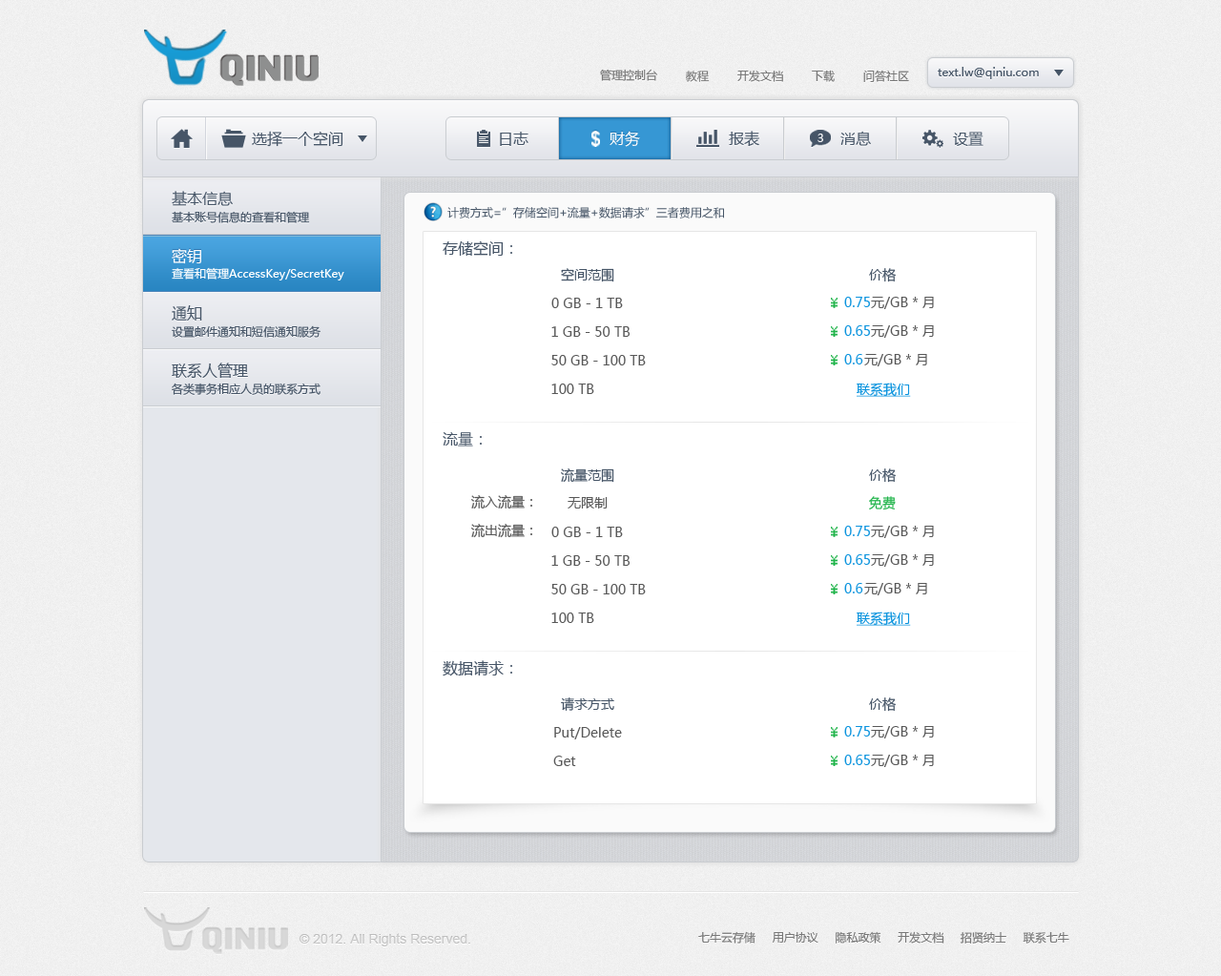
<style>
.page{position:relative;width:1221px;height:976px;background:#ffffff}
.page>*{position:absolute;margin:0}
.t1{font:11.5px "MicrosoftYaHei";color:#787878}
.t2{font:11.5px "MicrosoftYaHei";color:#465567}
.t3{font:15.3px "MicrosoftYaHei";color:#465567}
.t4{font:15.3px "MicrosoftYaHei";color:#ffffff}
.t5{font:11.5px "MicrosoftYaHei";color:#f8f8f9}
.t6{font:11.5px "MicrosoftYaHei";color:#ffffff}
.t7{font:13.4px "MicrosoftYaHei";color:#465567}
.t8{font:13.4px "MicrosoftYaHei";color:#585858}
.t9{font:13.4px "MicrosoftYaHei";color:#0c94de}
.t10{font:13.4px "MicrosoftYaHei";color:#0c94de;text-decoration:underline}
.t11{font:13.4px "MicrosoftYaHei";color:#20b44a}
.t12{font:13.4px "ArialMT";color:#c6c6c6}
</style>
<div class="page">
<p class="t1" style="left:600px;top:69px;width:57px;height:12px">管理控制台</p>
<p class="t1" style="left:686px;top:71px;width:24px;height:11px">教程</p>
<p class="t1" style="left:738px;top:70px;width:45px;height:12px">开发文档</p>
<p class="t1" style="left:812px;top:70px;width:23px;height:12px">下载</p>
<p class="t1" style="left:864px;top:70px;width:45px;height:12px">问答社区</p>
<p class="t2" style="left:938px;top:67px;width:101px;height:12px">text.lw@qiniu.com</p>
<p class="t3" style="left:252px;top:131px;width:92px;height:16px">选择一个空间</p>
<p class="t3" style="left:500px;top:132px;width:29px;height:14px">日志</p>
<p class="t4" style="left:610px;top:131px;width:30px;height:16px">财务</p>
<p class="t3" style="left:729px;top:131px;width:31px;height:16px">报表</p>
<p class="t5" style="left:818px;top:134px;width:6px;height:8px">3</p>
<p class="t3" style="left:841px;top:131px;width:30px;height:15px">消息</p>
<p class="t3" style="left:953px;top:132px;width:31px;height:14px">设置</p>
<p class="t3" style="left:172px;top:191px;width:61px;height:15px">基本信息</p>
<p class="t2" style="left:448px;top:206px;width:276px;height:13px">计费方式=”存储空间+流量+数据请求”三者费用之和</p>
<p class="t2" style="left:172px;top:211px;width:138px;height:12px">基本账号信息的查看和管理</p>
<p class="t3" style="left:443px;top:240px;width:69px;height:16px">存储空间：</p>
<p class="t4" style="left:172px;top:248px;width:29px;height:16px">密钥</p>
<p class="t6" style="left:172px;top:267px;width:172px;height:14px">查看和管理AccessKey/SecretKey</p>
<p class="t7" style="left:561px;top:268px;width:54px;height:14px">空间范围</p>
<p class="t7" style="left:869px;top:268px;width:27px;height:14px">价格</p>
<p class="t3" style="left:172px;top:305px;width:30px;height:16px">通知</p>
<p class="t8" style="left:552px;top:298px;width:71px;height:10px">0 GB - 1 TB</p>
<p class="t9" style="left:845px;top:297px;width:25px;height:10px">0.75</p>
<p class="t8" style="left:871px;top:297px;width:63px;height:12px">元/GB * 月</p>
<p class="t2" style="left:172px;top:325px;width:149px;height:13px">设置邮件通知和短信通知服务</p>
<p class="t8" style="left:552px;top:326px;width:78px;height:11px">1 GB - 50 TB</p>
<p class="t9" style="left:845px;top:325px;width:25px;height:11px">0.65</p>
<p class="t8" style="left:871px;top:325px;width:63px;height:13px">元/GB * 月</p>
<p class="t3" style="left:172px;top:363px;width:76px;height:16px">联系人管理</p>
<p class="t8" style="left:552px;top:355px;width:94px;height:10px">50 GB - 100 TB</p>
<p class="t9" style="left:845px;top:354px;width:19px;height:11px">0.6</p>
<p class="t8" style="left:865px;top:354px;width:63px;height:12px">元/GB * 月</p>
<p class="t2" style="left:172px;top:383px;width:149px;height:12px">各类事务相应人员的联系方式</p>
<p class="t8" style="left:552px;top:384px;width:43px;height:10px">100 TB</p>
<p class="t10" style="left:857px;top:383px;width:54px;height:14px">联系我们</p>
<p class="t3" style="left:443px;top:432px;width:39px;height:15px">流量：</p>
<p class="t7" style="left:561px;top:469px;width:54px;height:14px">流量范围</p>
<p class="t7" style="left:869px;top:469px;width:27px;height:14px">价格</p>
<p class="t8" style="left:471px;top:495px;width:61px;height:15px">流入流量：</p>
<p class="t8" style="left:568px;top:497px;width:40px;height:12px">无限制</p>
<p class="t11" style="left:869px;top:496px;width:27px;height:15px">免费</p>
<p class="t8" style="left:471px;top:524px;width:61px;height:14px">流出流量：</p>
<p class="t8" style="left:552px;top:527px;width:71px;height:10px">0 GB - 1 TB</p>
<p class="t9" style="left:845px;top:526px;width:25px;height:10px">0.75</p>
<p class="t8" style="left:871px;top:526px;width:63px;height:12px">元/GB * 月</p>
<p class="t8" style="left:552px;top:555px;width:78px;height:11px">1 GB - 50 TB</p>
<p class="t9" style="left:845px;top:554px;width:25px;height:11px">0.65</p>
<p class="t8" style="left:871px;top:554px;width:63px;height:13px">元/GB * 月</p>
<p class="t8" style="left:552px;top:584px;width:94px;height:11px">50 GB - 100 TB</p>
<p class="t9" style="left:845px;top:583px;width:19px;height:11px">0.6</p>
<p class="t8" style="left:865px;top:583px;width:63px;height:12px">元/GB * 月</p>
<p class="t8" style="left:552px;top:613px;width:43px;height:10px">100 TB</p>
<p class="t10" style="left:857px;top:612px;width:54px;height:14px">联系我们</p>
<p class="t3" style="left:443px;top:660px;width:69px;height:17px">数据请求：</p>
<p class="t7" style="left:561px;top:698px;width:54px;height:13px">请求方式</p>
<p class="t7" style="left:869px;top:698px;width:27px;height:14px">价格</p>
<p class="t8" style="left:554px;top:727px;width:68px;height:13px">Put/Delete</p>
<p class="t9" style="left:845px;top:726px;width:25px;height:11px">0.75</p>
<p class="t8" style="left:871px;top:726px;width:63px;height:13px">元/GB * 月</p>
<p class="t8" style="left:553px;top:756px;width:23px;height:10px">Get</p>
<p class="t9" style="left:845px;top:755px;width:25px;height:10px">0.65</p>
<p class="t8" style="left:871px;top:755px;width:63px;height:12px">元/GB * 月</p>
<p class="t12" style="left:299px;top:933px;width:171px;height:14px">© 2012. All Rights Reserved.</p>
<p class="t1" style="left:699px;top:931px;width:371px;height:13px">七牛云存储     用户协议     隐私政策     开发文档     招贤纳士     联系七牛</p>
</div>
